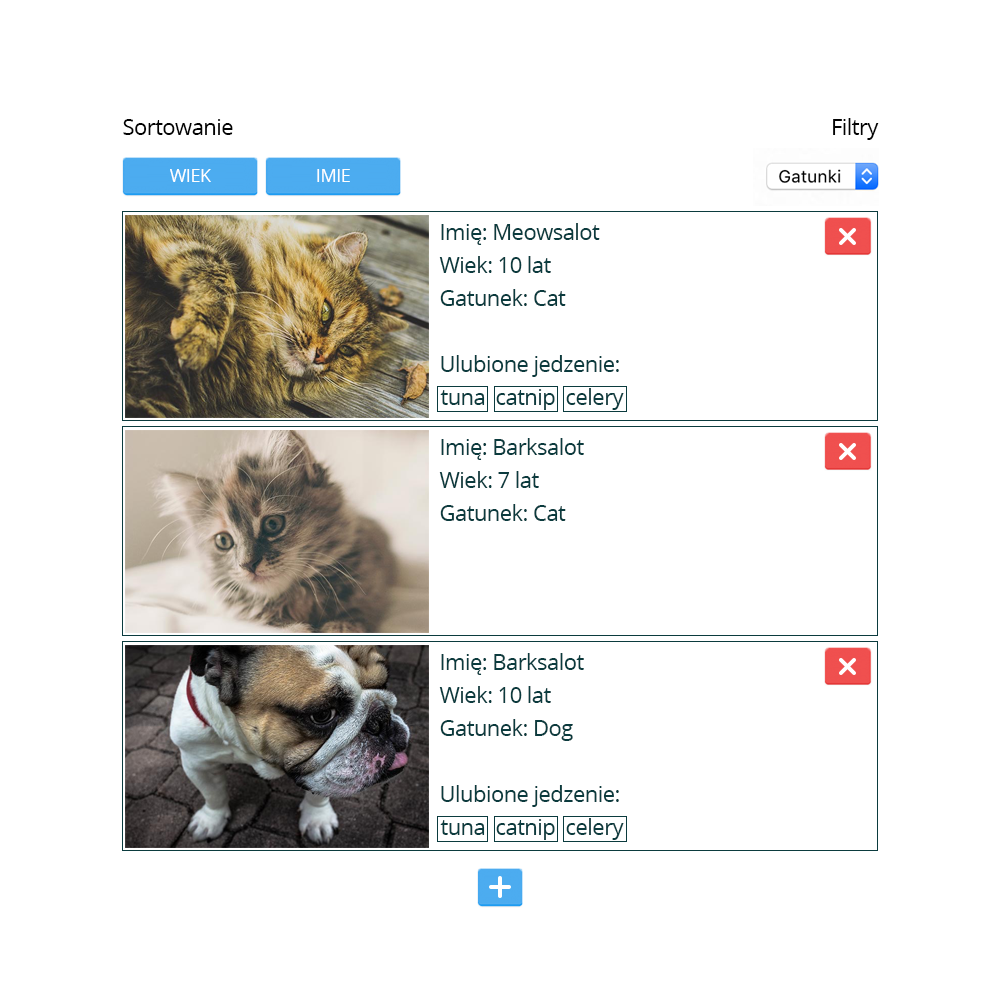
<style>
.page{position:relative;width:1000px;height:1000px;background:#ffffff}
.page>*{position:absolute;margin:0}
.t1{font:22px "OpenSans";letter-spacing:-0.025em;color:#030303}
.t2{font:18px "OpenSans";letter-spacing:-0.025em;color:#ffffff}
.t3{font:22px/33px "OpenSans";letter-spacing:-0.025em;color:#0b3b3e}
</style>
<div class="page">
<p class="t1" style="left:123px;top:119px;width:110px;height:16px">Sortowanie</p>
<p class="t1" style="left:833px;top:118px;width:46px;height:22px">Filtry</p>
<p class="t2" style="left:170px;top:169px;width:41px;height:13px">WIEK</p>
<p class="t2" style="left:317px;top:169px;width:33px;height:13px">IMIE</p>
<p class="t3" style="left:439px;top:223px;width:185px;height:187px">Imię: Meowsalot<br>Wiek: 10 lat<br>Gatunek: Cat<br><br>Ulubione jedzenie:<br>tuna  catnip  celery</p>
<p class="t3" style="left:439px;top:438px;width:145px;height:83px">Imię: Barksalot<br>Wiek: 7 lat<br>Gatunek: Cat</p>
<p class="t3" style="left:439px;top:653px;width:185px;height:187px">Imię: Barksalot<br>Wiek: 10 lat<br>Gatunek: Dog<br><br>Ulubione jedzenie:<br>tuna  catnip  celery</p>
</div>
